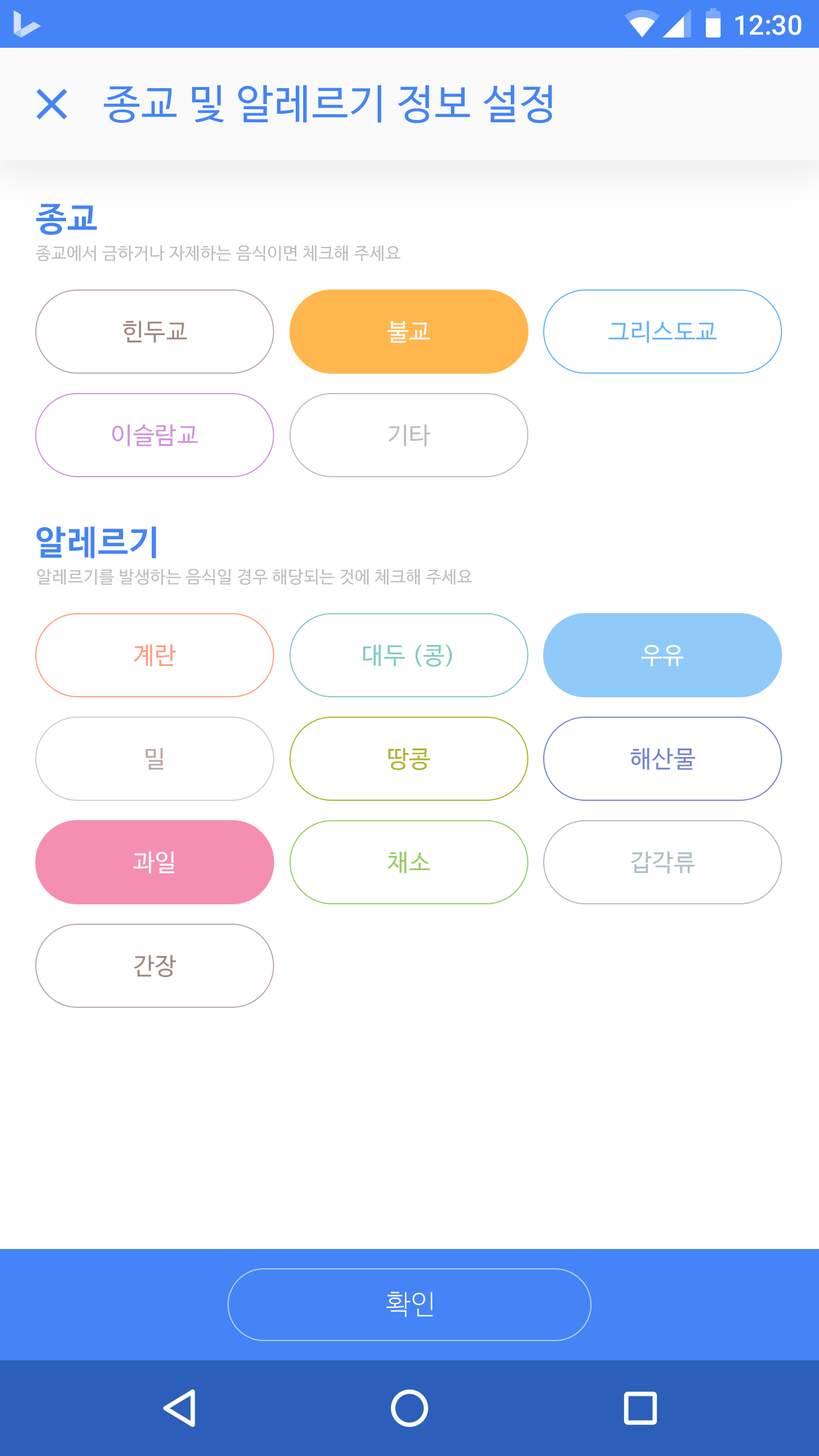
<style>
.page{position:relative;width:819px;height:1456px;background:#ffffff}
.page>*{position:absolute;margin:0}
.t1{font:27.3px "Roboto-Medium";color:#ffffff}
.t2{font:40.9px "NanumBarunGothic";letter-spacing:0.025em;color:#4484f6}
.t3{font:34.1px "NanumBarunGothicBold";letter-spacing:0.025em;color:#4484f6}
.t4{font:17.1px "NanumBarunGothic";letter-spacing:0.025em;color:#bdbdbd}
.t5{font:23.9px "NanumBarunGothic";letter-spacing:0.025em;color:#a1887f}
.t6{font:23.9px "NanumBarunGothic";letter-spacing:0.025em;color:#ffffff}
.t7{font:23.9px "NanumBarunGothic";letter-spacing:0.025em;color:#64b5f6}
.t8{font:23.9px "NanumBarunGothic";letter-spacing:0.025em;color:#ce93d8}
.t9{font:23.9px "NanumBarunGothic";letter-spacing:0.025em;color:#bdbdbd}
.t10{font:23.9px "NanumBarunGothic";letter-spacing:0.025em;color:#ff9e80}
.t11{font:23.9px "NanumBarunGothic";letter-spacing:0.025em;color:#80cbc4}
.t12{font:23.9px "NanumBarunGothic";letter-spacing:0.025em;color:#bcaaa4}
.t13{font:23.9px "NanumBarunGothic";letter-spacing:0.025em;color:#afb42b}
.t14{font:23.9px "NanumBarunGothic";letter-spacing:0.025em;color:#7986cb}
.t15{font:23.9px "NanumBarunGothic";letter-spacing:0.025em;color:#9ccc65}
.t16{font:23.9px "NanumBarunGothic";letter-spacing:0.025em;color:#b0bec5}
.t17{font:27.3px "NanumBarunGothicLight";letter-spacing:0.025em;color:#fafafa}
</style>
<div class="page">
<p class="t1" style="left:735px;top:15px;width:66px;height:20px">12:30</p>
<p class="t2" style="left:104px;top:85px;width:448px;height:38px">종교 및 알레르기 정보 설정</p>
<p class="t3" style="left:36px;top:204px;width:61px;height:31px">종교</p>
<p class="t4" style="left:35px;top:245px;width:365px;height:17px">종교에서 금하거나 자제하는 음식이면 체크해 주세요</p>
<p class="t5" style="left:123px;top:321px;width:64px;height:22px">힌두교</p>
<p class="t6" style="left:387px;top:321px;width:43px;height:22px">불교</p>
<p class="t7" style="left:608px;top:321px;width:109px;height:22px">그리스도교</p>
<p class="t8" style="left:112px;top:424px;width:86px;height:22px">이슬람교</p>
<p class="t9" style="left:388px;top:424px;width:43px;height:22px">기타</p>
<p class="t3" style="left:36px;top:526px;width:120px;height:33px">알레르기</p>
<p class="t4" style="left:37px;top:569px;width:436px;height:16px">알레르기를 발생하는 음식일 경우 해당되는 것에 체크해 주세요</p>
<p class="t10" style="left:134px;top:644px;width:42px;height:23px">계란</p>
<p class="t11" style="left:363px;top:644px;width:89px;height:23px">대두 (콩)</p>
<p class="t6" style="left:641px;top:645px;width:43px;height:22px">우유</p>
<p class="t12" style="left:146px;top:748px;width:17px;height:22px">밀</p>
<p class="t13" style="left:388px;top:748px;width:42px;height:22px">땅콩</p>
<p class="t14" style="left:631px;top:748px;width:65px;height:22px">해산물</p>
<p class="t6" style="left:133px;top:851px;width:41px;height:23px">과일</p>
<p class="t15" style="left:387px;top:851px;width:43px;height:23px">채소</p>
<p class="t16" style="left:631px;top:851px;width:64px;height:23px">갑각류</p>
<p class="t5" style="left:134px;top:955px;width:42px;height:22px">간장</p>
<p class="t17" style="left:386px;top:1292px;width:47px;height:25px">확인</p>
</div>
